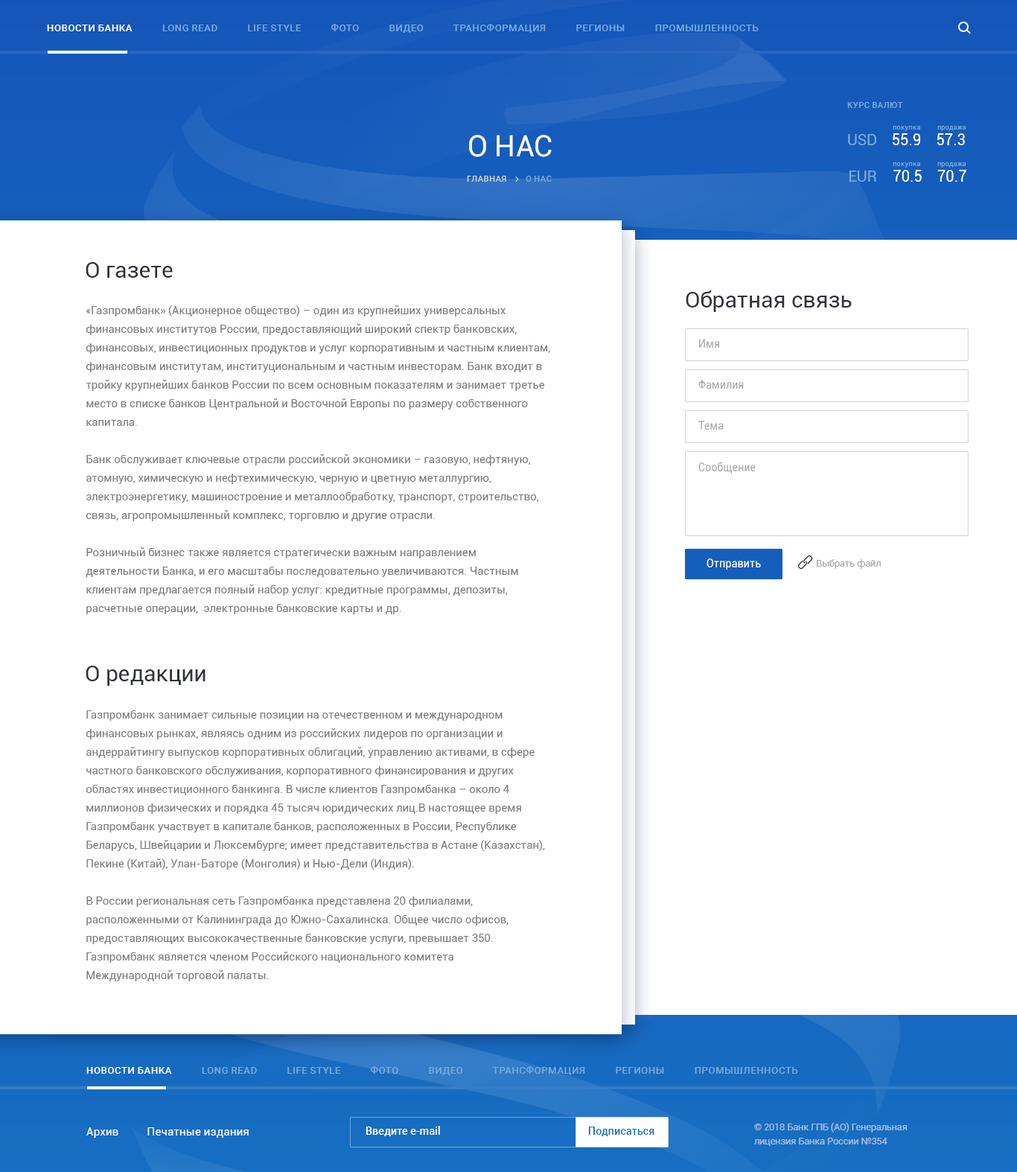
<style>
.page{position:relative;width:1017px;height:1172px;background:#ffffff}
.page>*{position:absolute;margin:0}
.t1{font:9.7px "Roboto-Medium";color:#78acdb;text-transform:uppercase}
.t2{font:9.7px "Roboto-Medium";color:#ffffff;text-transform:uppercase}
.t3{font:8.2px "Roboto-Medium";color:#78acdb;text-transform:uppercase}
.t4{font:6.7px "Roboto-Regular";color:#78acdb}
.t5{font:29.5px "Roboto-Regular";color:#ffffff;text-transform:uppercase}
.t6{font:15.6px "Roboto-Regular";color:#78acdb}
.t7{font:15.6px "Roboto-Regular";color:#ffffff;scale:0.96 1}
.t8{font:8.2px "Roboto-Medium";color:#d0d0d0;text-transform:uppercase;scale:1.03 1}
.t9{font:8.2px "Roboto-Medium";color:#78acdb;text-transform:uppercase;scale:1.03 1}
.t10{font:22.3px "Roboto-Regular";color:#303239}
.t11{font:11.2px/18.6px "Roboto-Regular";color:#7b7b7b}
.t12{font:11.2px "Roboto-Regular";color:#a9a9a9;scale:0.96 1}
.t13{font:11.2px "Roboto-Regular";color:#ffffff;scale:0.96 1}
.t14{font:9.7px "Roboto-Regular";color:#a9a9a9;scale:0.96 1}
.t15{font:11.2px "Roboto-Regular";color:#ffffff}
.t16{font:11.2px "Roboto-Medium";color:#ffffff;scale:0.96 1}
.t17{font:11.2px "Roboto-Medium";color:#166ec2;scale:0.96 1}
.t18{font:9.7px/14.1px "Roboto-Regular";color:#a7bfe1;scale:0.96 1}
</style>
<div class="page">
<p class="t1" style="left:47px;top:24px;width:712px;height:9px"><span class="t2">Новости банка          </span>  Long Read            Life Style            Фото            Видео            Трансформация            Регионы            Промышленность</p>
<p class="t3" style="left:847px;top:102px;width:56px;height:6px">курс валют</p>
<p class="t4" style="left:893px;top:126px;width:27px;height:5px">покупка</p>
<p class="t4" style="left:938px;top:126px;width:28px;height:5px">продажа</p>
<p class="t5" style="left:469px;top:135px;width:83px;height:22px">О нас</p>
<p class="t6" style="left:848px;top:134px;width:29px;height:11px">USD</p>
<p class="t7" style="left:893px;top:133px;width:72px;height:12px">55.9    57.3</p>
<p class="t6" style="left:849px;top:171px;width:28px;height:11px">EUR</p>
<p class="t4" style="left:893px;top:162px;width:27px;height:6px">покупка</p>
<p class="t7" style="left:894px;top:170px;width:73px;height:12px">70.5    70.7</p>
<p class="t4" style="left:938px;top:162px;width:28px;height:6px">продажа</p>
<p class="t8" style="left:467px;top:176px;width:85px;height:6px">Главная <span class="t9">        о нас</span></p>
<p class="t10" style="left:86px;top:262px;width:87px;height:16px">О газете</p>
<p class="t10" style="left:686px;top:290px;width:166px;height:22px">Обратная связь</p>
<p class="t11" style="left:86px;top:305px;width:464px;height:309px">«Газпромбанк» (Акционерное общество) – один из крупнейших универсальных финансовых институтов России, предоставляющий широкий спектр банковских, финансовых, инвестиционных продуктов и услуг корпоративным и частным клиентам, финансовым институтам, институциональным и частным инвесторам. Банк входит в тройку крупнейших банков России по всем основным показателям и занимает третье место в списке банков Центральной и Восточной Европы по размеру собственного капитала.<br><br>Банк обслуживает ключевые отрасли российской экономики – газовую, нефтяную, атомную, химическую и нефтехимическую, черную и цветную металлургию, электроэнергетику, машиностроение и металлообработку, транспорт, строительство, связь, агропромышленный комплекс, торговлю и другие отрасли.<br><br>Розничный бизнес также является стратегически важным направлением<br>деятельности Банка, и его масштабы последовательно увеличиваются. Частным клиентам предлагается полный набор услуг: кредитные программы, депозиты, расчетные операции,  электронные банковские карты и др.</p>
<p class="t12" style="left:699px;top:339px;width:20px;height:9px">Имя</p>
<p class="t12" style="left:699px;top:380px;width:45px;height:9px">Фамилия</p>
<p class="t12" style="left:699px;top:421px;width:25px;height:9px">Тема</p>
<p class="t12" style="left:699px;top:462px;width:57px;height:12px">Сообщение</p>
<p class="t13" style="left:707px;top:559px;width:54px;height:11px">Отправить</p>
<p class="t14" style="left:817px;top:559px;width:64px;height:10px">Выбрать файл</p>
<p class="t10" style="left:86px;top:666px;width:120px;height:20px">О редакции</p>
<p class="t11" style="left:86px;top:710px;width:459px;height:272px">Газпромбанк занимает сильные позиции на отечественном и международном финансовых рынках, являясь одним из российских лидеров по организации и андеррайтингу выпусков корпоративных облигаций, управлению активами, в сфере частного банковского обслуживания, корпоративного финансирования и других областях инвестиционного банкинга. В числе клиентов Газпромбанка – около 4 миллионов физических и порядка 45 тысяч юридических лиц.В настоящее время Газпромбанк участвует в капитале банков, расположенных в России, Республике Беларусь, Швейцарии и Люксембурге; имеет представительства в Астане (Казахстан), Пекине (Китай), Улан-Баторе (Монголия) и Нью-Дели (Индия).<br><br>В России региональная сеть Газпромбанка представлена 20 филиалами, расположенными от Калининграда до Южно-Сахалинска. Общее число офисов, предоставляющих высококачественные банковские услуги, превышает 350.  Газпромбанк является членом Российского национального комитета<br>Международной торговой палаты.</p>
<p class="t1" style="left:86px;top:1066px;width:712px;height:9px"><span class="t2">Новости банка          </span>  Long Read            Life Style            Фото            Видео            Трансформация            Регионы            Промышленность</p>
<p class="t15" style="left:86px;top:1127px;width:163px;height:11px">Архив          Печатные издания</p>
<p class="t16" style="left:366px;top:1126px;width:74px;height:10px">Введите e-mail</p>
<p class="t17" style="left:588px;top:1127px;width:67px;height:9px">Подписаться</p>
<p class="t18" style="left:754px;top:1122px;width:153px;height:24px">© 2018 Банк ГПБ (АО) Генеральная<br>лицензия Банка России №354</p>
</div>
